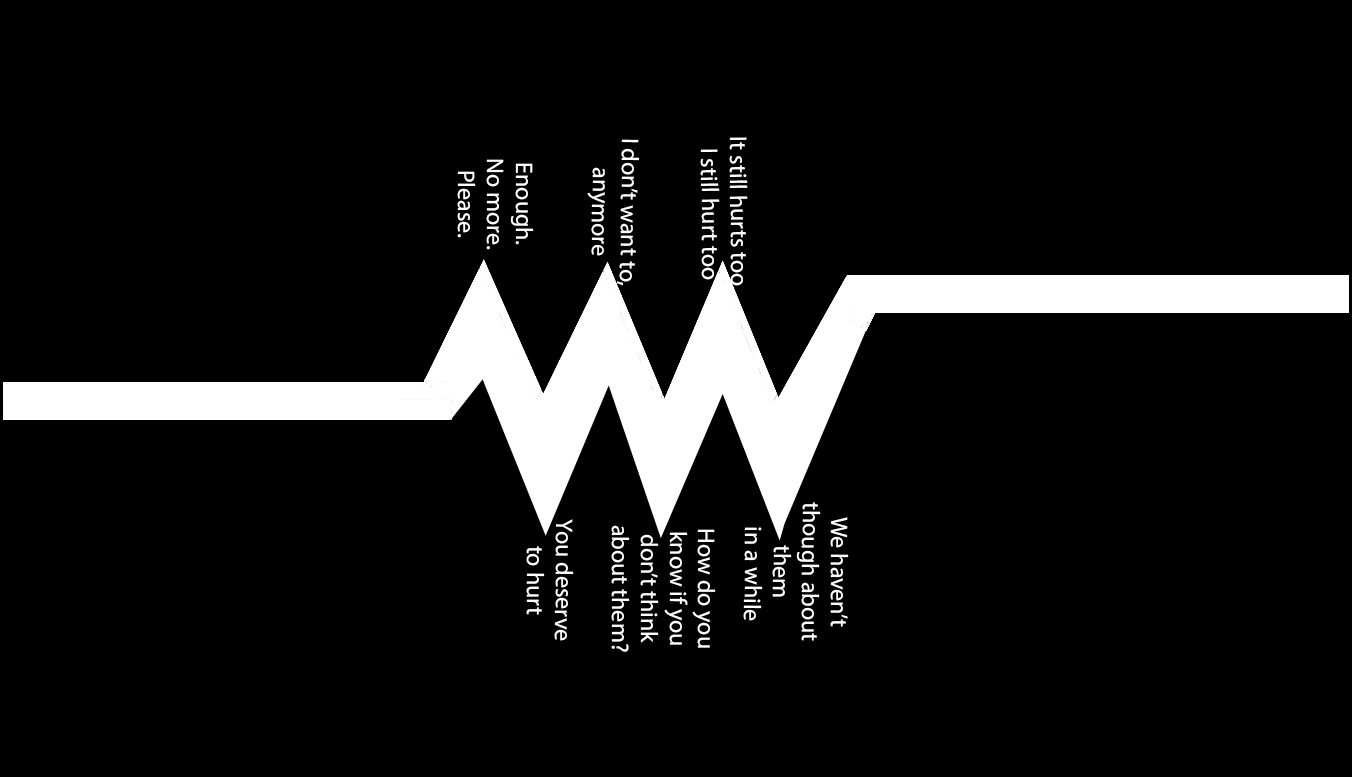
<style>
.page{position:relative;width:1352px;height:777px;background:#000000}
.page>*{position:absolute;margin:0}
.t1{font:24px "MyriadPro-Regular";color:#ffffff}
</style>
<div class="page">
<p class="t1" style="left:700px;top:137px;width:48px;height:154px;rotate:89deg">It still hurts too. I still hurt too</p>
<p class="t1" style="left:587px;top:139px;width:52px;height:147px;rotate:91deg">I don’t want to, anymore</p>
<p class="t1" style="left:457px;top:159px;width:77px;height:91px;rotate:90deg">Enough. No more. Please.</p>
<p class="t1" style="left:743px;top:502px;width:106px;height:139px;text-align:center;rotate:90deg">We haven’t though about them<br> in a while</p>
<p class="t1" style="left:526px;top:519px;width:48px;height:122px;rotate:90deg">You deserve to hurt</p>
<p class="t1" style="left:611px;top:525px;width:105px;height:127px;rotate:90deg">How do you know if you don’t think about them?</p>
</div>
